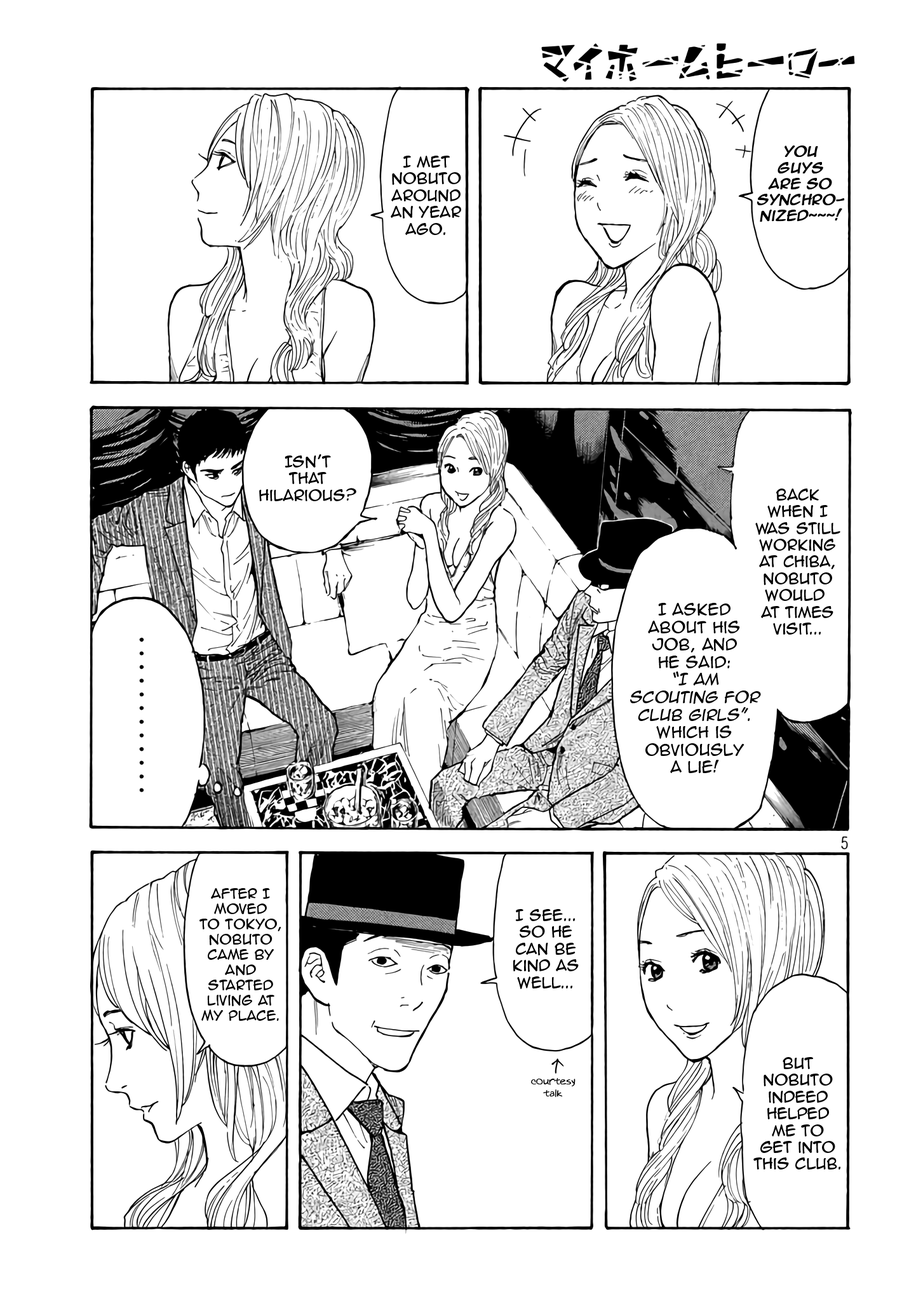
<style>
.page{position:relative;width:916px;height:1301px;background:#ffffff}
.page>*{position:absolute;margin:0}
.t1{font:13.3px "AnimeAce2.0BB";color:#000000;font-weight:bold;font-style:italic}
.t2{font:14px "AnimeAce2.0BB";color:#000000}
.t3{font:14.6px "AnimeAce2.0BB";color:#000000}
.t4{font:14.6px "AnimeAce2.0BB";color:#000000;font-style:italic}
.t5{font:12.7px "AnimeAce2.0BB";color:#000000}
.t6{font:10.2px "Augie";color:#000000}
</style>
<div class="page">
<p class="t1" style="left:757px;top:146px;width:88px;height:76px;text-align:center">You<br>guys<br>are so<br>synchro-<br>nized~~~!</p>
<p class="t2" style="left:391px;top:156px;width:70px;height:79px;text-align:center">I met<br>nobuto<br>around<br>an year<br>ago.</p>
<p class="t2" style="left:259px;top:454px;width:97px;height:47px;text-align:center">Isn’t<br>that<br>hilarious?</p>
<p class="t2" style="left:756px;top:489px;width:85px;height:146px;text-align:center">back<br>when I<br>was still<br>Working<br>at chiba,<br>Nobuto<br>would <br>at times<br>visit...</p>
<p class="t3" style="left:630px;top:603px;width:131px;height:170px;text-align:center">I asked<br>About his<br>job, and<br>he said:<br><span class="t4">“I am<br>scouting for<br>club girls”</span>.<br>which is<br>obviously<br>a lie!</p>
<p class="t5" style="left:200px;top:888px;width:81px;height:133px;text-align:center">After I<br>MOved<br>To Tokyo,<br>Nobuto<br>came by<br>and<br>started<br>living at<br>my place.</p>
<p class="t2" style="left:513px;top:909px;width:66px;height:80px;text-align:center">I see...<br>so He<br>can Be<br>Kind as<br>well...</p>
<p class="t2" style="left:754px;top:1057px;width:87px;height:113px;text-align:center">BUt<br>nObuto<br>indeed<br>helped<br>me To<br>get into<br>this Club.</p>
<p class="t6" style="left:531px;top:1078px;width:45px;height:19px;text-align:center">courtesy<br>talk</p>
</div>
